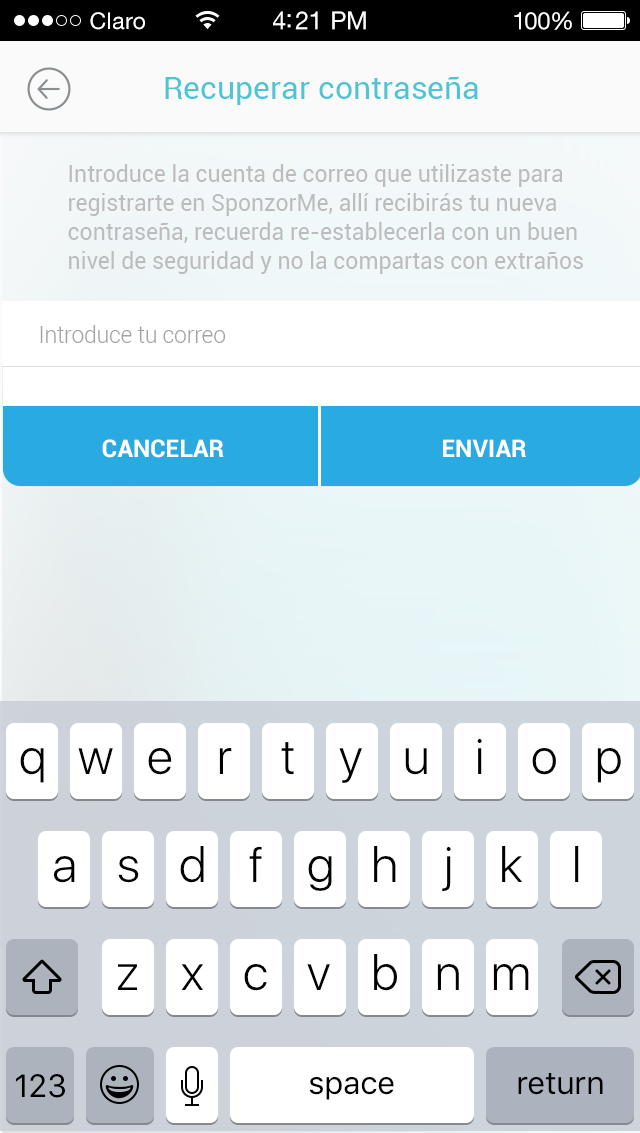
<style>
.page{position:relative;width:640px;height:1133px;background:#ffffff}
.page>*{position:absolute;margin:0}
.t1{font:23px "HelveticaNeueLTStd-Roman";letter-spacing:0.02em;color:#ffffff}
.t2{font:25px "HelveticaNeueLTStd-Roman";letter-spacing:-0.02em;color:#ffffff}
.t3{font:24px "HelveticaNeueLTStd-Roman";letter-spacing:-0.02em;color:#ffffff}
.t4{font:32px "Roboto-Regular";color:#51c4d4}
.t5{font:22.9px/29.2px "Roboto-Regular";color:#bcbcbc}
.t6{font:22.9px "Roboto-Light";letter-spacing:-0.01em;color:#a3a3a3}
.t7{font:24.1px "Roboto-Bold";color:#ffffff}
.t8{font:49px "SFUIDisplay-Light";color:#000000}
.t9{font:32px "SFUIText-Regular";letter-spacing:-0.02em;color:#000000}
</style>
<div class="page">
<p class="t1" style="left:90px;top:12px;width:55px;height:18px">Claro</p>
<p class="t2" style="left:273px;top:11px;width:93px;height:19px">4:21 PM</p>
<p class="t3" style="left:514px;top:11px;width:58px;height:19px">100%</p>
<p class="t4" style="left:165px;top:76px;width:313px;height:29px">Recuperar contraseña</p>
<p class="t5" style="left:68px;top:164px;width:515px;height:110px">Introduce la cuenta de correo que utilizaste para registrarte en SponzorMe, allí recibirás tu nueva contraseña, recuerda re-establecerla con un buen nivel de seguridad y no la compartas con extraños</p>
<p class="t6" style="left:40px;top:325px;width:186px;height:18px">Introduce tu correo</p>
<p class="t7" style="left:102px;top:439px;width:122px;height:19px">CANCELAR</p>
<p class="t7" style="left:443px;top:439px;width:83px;height:18px">ENVIAR</p>
<p class="t8" style="left:20px;top:748px;width:24px;height:35px">q</p>
<p class="t8" style="left:78px;top:748px;width:35px;height:26px">w</p>
<p class="t8" style="left:148px;top:748px;width:24px;height:27px">e</p>
<p class="t8" style="left:219px;top:748px;width:13px;height:26px">r</p>
<p class="t8" style="left:281px;top:742px;width:13px;height:33px">t</p>
<p class="t8" style="left:339px;top:748px;width:23px;height:35px">y</p>
<p class="t8" style="left:405px;top:748px;width:22px;height:27px">u</p>
<p class="t8" style="left:477px;top:738px;width:5px;height:36px">i</p>
<p class="t8" style="left:532px;top:748px;width:24px;height:27px">o</p>
<p class="t8" style="left:597px;top:748px;width:24px;height:35px">p</p>
<p class="t8" style="left:180px;top:846px;width:24px;height:37px">d</p>
<p class="t8" style="left:249px;top:846px;width:13px;height:36px">f</p>
<p class="t8" style="left:374px;top:846px;width:22px;height:36px">h</p>
<p class="t8" style="left:442px;top:846px;width:9px;height:46px">j</p>
<p class="t8" style="left:502px;top:846px;width:21px;height:36px">k</p>
<p class="t8" style="left:575px;top:846px;width:4px;height:36px">l</p>
<p class="t8" style="left:53px;top:856px;width:22px;height:27px">a</p>
<p class="t8" style="left:118px;top:856px;width:21px;height:27px">s</p>
<p class="t8" style="left:308px;top:856px;width:24px;height:35px">g</p>
<p class="t8" style="left:118px;top:964px;width:20px;height:26px">z</p>
<p class="t8" style="left:181px;top:964px;width:22px;height:26px">x</p>
<p class="t8" style="left:244px;top:964px;width:23px;height:27px">c</p>
<p class="t8" style="left:307px;top:964px;width:23px;height:26px">v</p>
<p class="t8" style="left:374px;top:954px;width:23px;height:37px">b</p>
<p class="t8" style="left:437px;top:964px;width:22px;height:26px">n</p>
<p class="t8" style="left:493px;top:964px;width:36px;height:26px">m</p>
<p class="t9" style="left:518px;top:1072px;width:85px;height:23px">return</p>
<p class="t9" style="left:15px;top:1074px;width:50px;height:24px">123</p>
<p class="t9" style="left:309px;top:1076px;width:85px;height:24px">space</p>
</div>
